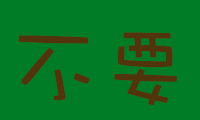
<style>
.page{position:relative;width:200px;height:120px;background:#007c27}
.page>*{position:absolute;margin:0}
.t1{font:91.6px "DFWaWaTC-W5";color:#51330c}
</style>
<div class="page">
<p class="t1" style="left:18px;top:32px;width:159px;height:74px">不要</p>
</div>
